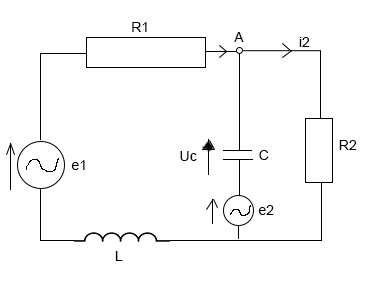
<style>
.page{position:relative;width:387px;height:287px;background:#ffffff}
.page>*{position:absolute;margin:0}
.t1{font:14px "ArialMT";color:#000000}
</style>
<div class="page">
<p class="t1" style="left:132px;top:22px;width:15px;height:10px">R1</p>
<p class="t1" style="left:234px;top:32px;width:10px;height:10px">A</p>
<p class="t1" style="left:299px;top:37px;width:11px;height:10px">i2</p>
<p class="t1" style="left:259px;top:150px;width:10px;height:10px">C</p>
<p class="t1" style="left:339px;top:140px;width:18px;height:10px">R2</p>
<p class="t1" style="left:71px;top:160px;width:14px;height:10px">e1</p>
<p class="t1" style="left:180px;top:151px;width:17px;height:10px">Uc</p>
<p class="t1" style="left:258px;top:205px;width:16px;height:10px">e2</p>
<p class="t1" style="left:115px;top:251px;width:8px;height:10px">L</p>
</div>
